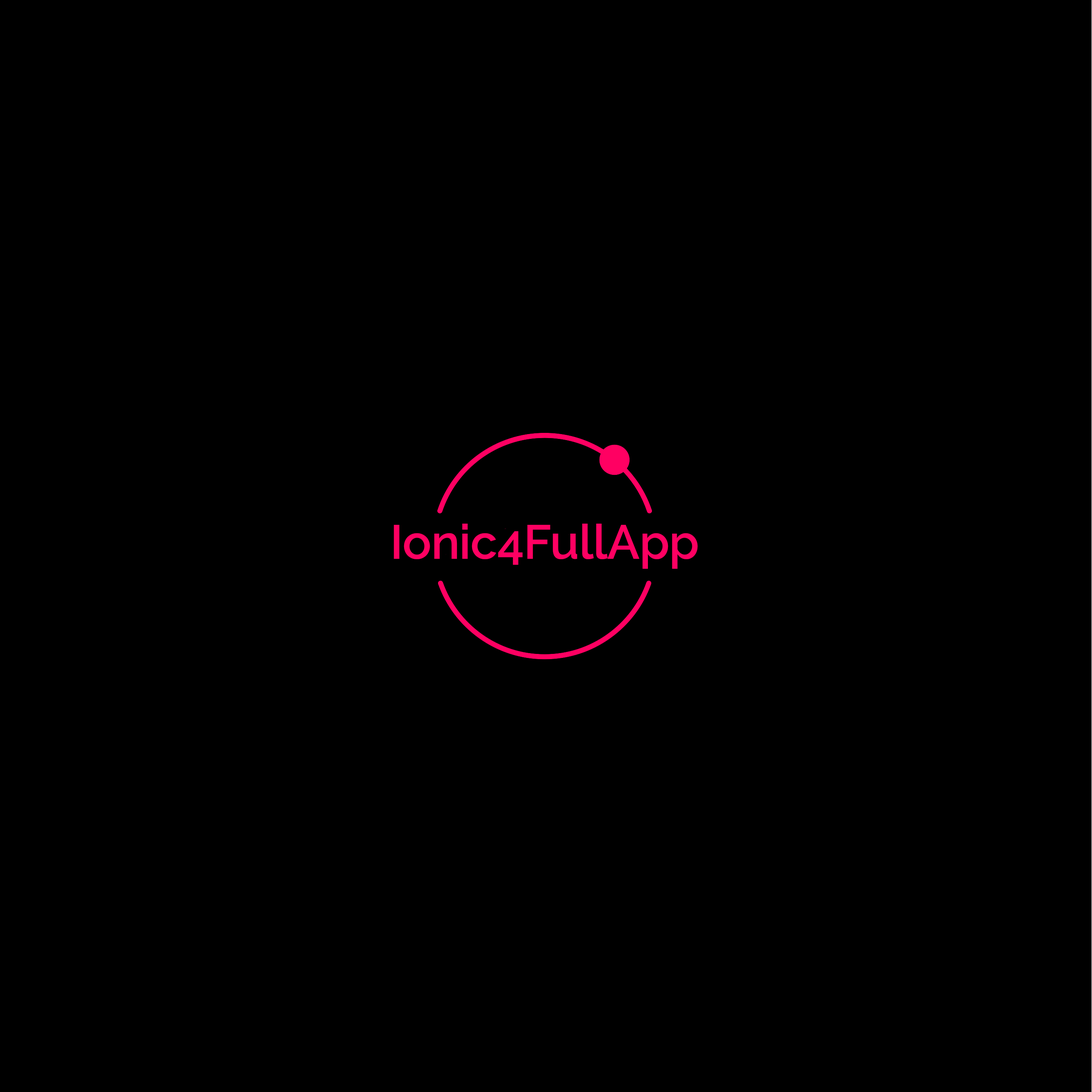
<style>
.page{position:relative;width:1092px;height:1092px;background:#000000}
.page>*{position:absolute;margin:0}
.t1{font:48px "Raleway-SemiBold";letter-spacing:-0.005em;color:#ff0062}
</style>
<div class="page">
<p class="t1" style="left:394px;top:524px;width:304px;height:45px">Ionic4FullApp</p>
</div>
